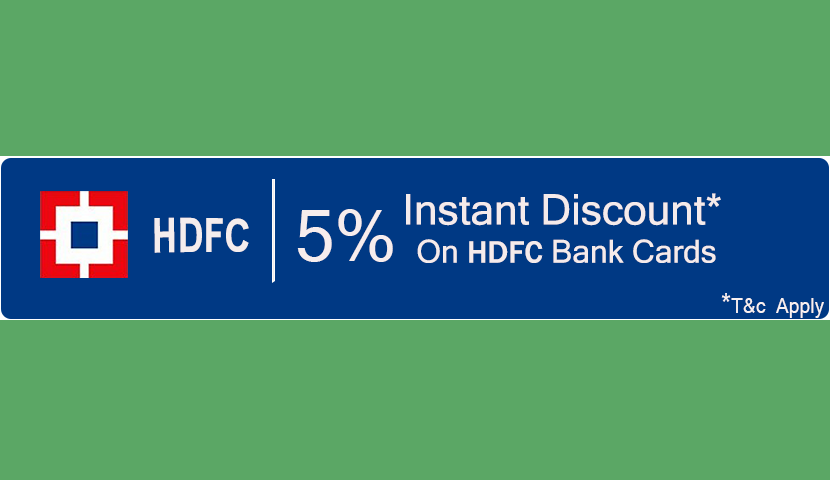
<style>
.page{position:relative;width:830px;height:480px;background:#5ba765}
.page>*{position:absolute;margin:0}
.t1{font:42.3px "MicrosoftSansSerif";color:#f6ebeb}
.t2{font:31.8px "MicrosoftSansSerif";color:#f6ebeb}
.t3{font:31.8px "FranklinGothic-Medium";color:#f6ebeb}
.t4{font:70.6px "MicrosoftSansSerif";color:#f8eeee}
.t5{font:47.7px "Arial-BoldMT";color:#f6eeee;scale:0.74 1}
.t6{font:21.2px "MicrosoftSansSerif";color:#f9f1f1;scale:0.91 1}
.t7{font:28.2px "MicrosoftSansSerif";color:#f9f1f1;scale:0.91 1}
</style>
<div class="page">
<p class="t1" style="left:406px;top:193px;width:315px;height:70px">Instant Discount*<br><span class="t2">   On </span><span class="t3">HDFC</span><span class="t2"> Bank Cards</span></p>
<p class="t4" style="left:297px;top:209px;width:96px;height:53px">5%</p>
<p class="t5" style="left:154px;top:217px;width:95px;height:36px">HDFC</p>
<p class="t6" style="left:721px;top:293px;width:103px;height:25px"><span class="t7">*</span>T&amp;c  Apply</p>
</div>
